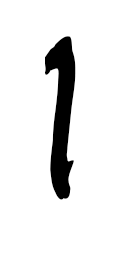
<style>
.page{position:relative;width:128px;height:256px;background:#ffffff}
.page>*{position:absolute;margin:0}
.t1{font:250px "AB-fudeshichi";letter-spacing:0.42em;color:#000000;scale:0.7 1}
</style>
<div class="page">
<p class="t1" style="left:45px;top:36px;width:31px;height:164px">l</p>
</div>
